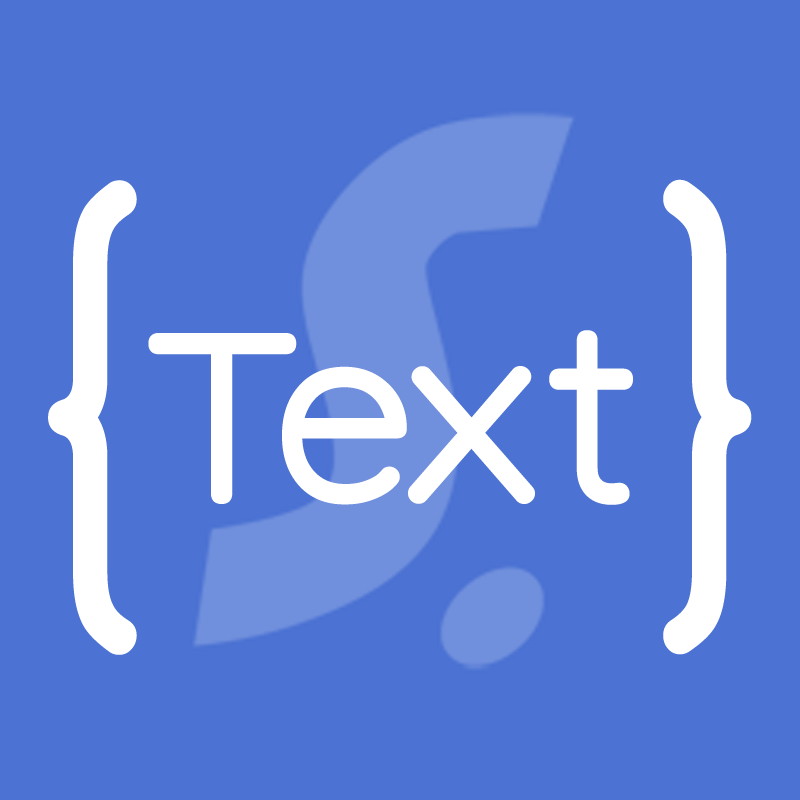
<style>
.page{position:relative;width:800px;height:800px;background:#4c73d3}
.page>*{position:absolute;margin:0}
.t1{font:480px "Capanito-M-Kyohkan";color:#ffffff}
.t2{font:200px "Capanito-M-Kyohkan";color:#ffffff;font-weight:bold}
</style>
<div class="page">
<p class="t1" style="left:48px;top:180px;width:89px;height:475px">{</p>
<p class="t1" style="left:663px;top:179px;width:89px;height:476px">}</p>
<p class="t2" style="left:148px;top:330px;width:485px;height:175px">Text</p>
</div>
